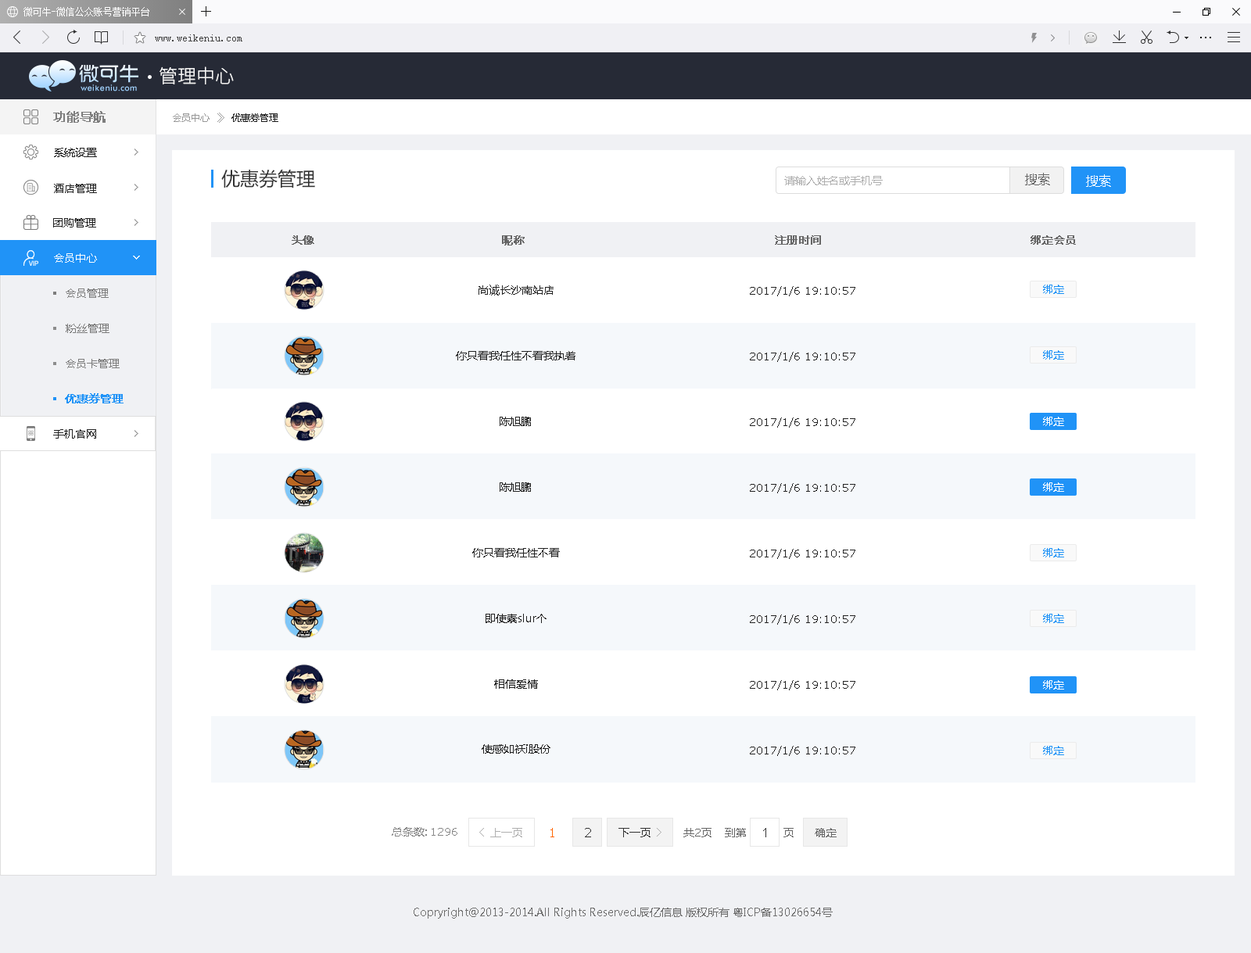
<style>
.page{position:relative;width:1251px;height:953px;background:#ffffff}
.page>*{position:absolute;margin:0}
.t1{font:18.8px "SourceHanSansCN-Light";color:#e1e1e1}
.t2{font:12.5px "MicrosoftYaHei";color:#7d7d7d;font-weight:bold}
.t3{font:9.4px "MicrosoftYaHei";color:#999999}
.t4{font:10.9px "SimSun";color:#999999}
.t5{font:9.4px "MicrosoftYaHei";color:#222222}
.t6{font:10.9px "MicrosoftYaHei";color:#222222}
.t7{font:18.8px "MicrosoftYaHei";color:#333333}
.t8{font:12.5px "MicrosoftYaHei";color:#666666}
.t9{font:10.9px "MicrosoftYaHei";color:#afafaf}
.t10{font:12.5px "MicrosoftYaHei";color:#ffffff}
.t11{font:10.9px "MicrosoftYaHei";color:#666666;font-weight:bold}
.t12{font:10.9px "MicrosoftYaHei";color:#ffffff}
.t13{font:10.9px "MicrosoftYaHei";color:#7d7d7d}
.t14{font:10.9px "Verdana";color:#222222}
.t15{font:10.9px "MicrosoftYaHei";color:#2093f7}
.t16{font:10.9px "MicrosoftYaHei";color:#2093f7;font-weight:bold}
.t17{font:10.9px "MicrosoftYaHei";color:#888888}
.t18{font:10.9px "Verdana";color:#888888}
.t19{font:12.5px "Verdana";color:#ff6600}
.t20{font:12.5px "Verdana";color:#333333}
.t21{font:10.9px "MicrosoftYaHei";color:#333333}
.t22{font:10.9px "MicrosoftYaHei";color:#666666}
.t23{font:10.9px "Verdana";color:#666666}
.t24{font:12.5px "ArialMT";color:#333333}
.t25{font:10.9px "MicrosoftYaHei";color:#6f6f6f}
</style>
<div class="page">
<p class="t1" style="left:160px;top:66px;width:74px;height:18px">管理中心</p>
<p class="t2" style="left:53px;top:111px;width:53px;height:12px">功能导航</p>
<p class="t3" style="left:173px;top:113px;width:37px;height:9px">会员中心</p>
<p class="t4" style="left:217px;top:113px;width:7px;height:10px">》</p>
<p class="t5" style="left:231px;top:113px;width:47px;height:9px">优惠券管理</p>
<p class="t6" style="left:54px;top:148px;width:43px;height:9px">系统设置</p>
<p class="t7" style="left:221px;top:170px;width:94px;height:18px">优惠券管理</p>
<p class="t8" style="left:1025px;top:173px;width:25px;height:12px">搜索</p>
<p class="t6" style="left:54px;top:184px;width:43px;height:9px">酒店管理</p>
<p class="t9" style="left:784px;top:176px;width:99px;height:9px">请输入姓名或手机号</p>
<p class="t10" style="left:1086px;top:174px;width:25px;height:13px">搜索</p>
<p class="t6" style="left:53px;top:218px;width:43px;height:10px">团购管理</p>
<p class="t11" style="left:292px;top:235px;width:22px;height:10px">头像</p>
<p class="t11" style="left:502px;top:235px;width:23px;height:11px">昵称</p>
<p class="t11" style="left:775px;top:235px;width:46px;height:10px">注册时间</p>
<p class="t11" style="left:1031px;top:235px;width:45px;height:10px">绑定会员</p>
<p class="t12" style="left:54px;top:253px;width:43px;height:10px">会员中心</p>
<p class="t13" style="left:66px;top:289px;width:43px;height:9px">会员管理</p>
<p class="t6" style="left:479px;top:285px;width:75px;height:11px">尚诚长沙南站店</p>
<p class="t14" style="left:750px;top:286px;width:105px;height:10px">2017/1/6 19:10:57</p>
<p class="t15" style="left:1043px;top:285px;width:21px;height:9px">绑定</p>
<p class="t13" style="left:66px;top:324px;width:43px;height:9px">粉丝管理</p>
<p class="t6" style="left:456px;top:351px;width:119px;height:9px">你只看我任性不看我执着</p>
<p class="t14" style="left:750px;top:352px;width:105px;height:10px">2017/1/6 19:10:57</p>
<p class="t15" style="left:1043px;top:350px;width:21px;height:10px">绑定</p>
<p class="t13" style="left:66px;top:359px;width:54px;height:9px">会员卡管理</p>
<p class="t16" style="left:65px;top:393px;width:59px;height:10px">优惠券管理</p>
<p class="t6" style="left:500px;top:417px;width:31px;height:9px">陈旭鹏</p>
<p class="t14" style="left:750px;top:418px;width:105px;height:10px">2017/1/6 19:10:57</p>
<p class="t12" style="left:1043px;top:417px;width:21px;height:9px">绑定</p>
<p class="t6" style="left:53px;top:429px;width:43px;height:10px">手机官网</p>
<p class="t6" style="left:500px;top:482px;width:31px;height:10px">陈旭鹏</p>
<p class="t14" style="left:750px;top:483px;width:105px;height:10px">2017/1/6 19:10:57</p>
<p class="t12" style="left:1043px;top:482px;width:21px;height:10px">绑定</p>
<p class="t6" style="left:472px;top:548px;width:88px;height:9px">你只看我任性不看</p>
<p class="t14" style="left:750px;top:549px;width:105px;height:10px">2017/1/6 19:10:57</p>
<p class="t15" style="left:1043px;top:548px;width:21px;height:9px">绑定</p>
<p class="t6" style="left:486px;top:614px;width:61px;height:9px">即使素slur个</p>
<p class="t14" style="left:750px;top:615px;width:105px;height:10px">2017/1/6 19:10:57</p>
<p class="t15" style="left:1043px;top:614px;width:21px;height:9px">绑定</p>
<p class="t6" style="left:494px;top:679px;width:44px;height:10px">相信爱情</p>
<p class="t14" style="left:750px;top:680px;width:105px;height:10px">2017/1/6 19:10:57</p>
<p class="t12" style="left:1043px;top:680px;width:21px;height:10px">绑定</p>
<p class="t6" style="left:482px;top:744px;width:68px;height:10px">使感如袄i股份</p>
<p class="t14" style="left:750px;top:746px;width:105px;height:10px">2017/1/6 19:10:57</p>
<p class="t15" style="left:1043px;top:746px;width:21px;height:9px">绑定</p>
<p class="t17" style="left:392px;top:827px;width:65px;height:10px">总条数: <span class="t18">1296</span></p>
<p class="t9" style="left:490px;top:828px;width:32px;height:9px">上一页</p>
<p class="t19" style="left:550px;top:828px;width:4px;height:9px">1</p>
<p class="t20" style="left:585px;top:828px;width:6px;height:9px">2</p>
<p class="t21" style="left:618px;top:828px;width:33px;height:9px">下一页</p>
<p class="t22" style="left:683px;top:828px;width:111px;height:9px">共<span class="t23">2</span>页    到第           页</p>
<p class="t24" style="left:763px;top:828px;width:3px;height:9px">1</p>
<p class="t22" style="left:815px;top:828px;width:22px;height:9px">确定</p>
<p class="t25" style="left:414px;top:908px;width:419px;height:11px">Copryright@2013-2014.All Rights Reserved.辰亿信息 版权所有 粤ICP备13026654号</p>
</div>
